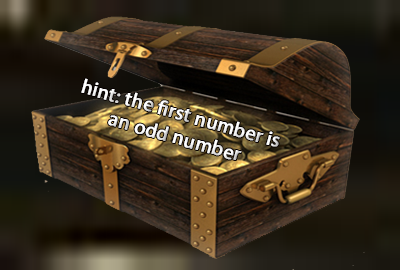
<style>
.page{position:relative;width:400px;height:270px}
.page>*{position:absolute;margin:0}
.t1{font:20px "MyriadPro-Regular";color:#ffffff;font-weight:bold}
</style>
<div class="page">
<p class="t1" style="left:81px;top:78px;width:199px;height:82px;rotate:16deg">hint: the first number is an odd number</p>
</div>
